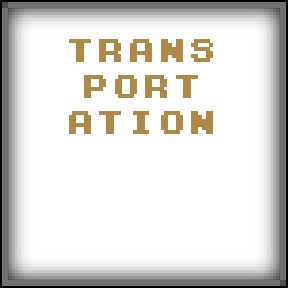
<style>
.page{position:relative;width:288px;height:288px;background:#ffffff}
.page>*{position:absolute;margin:0}
.t1{font:30px "KongtextRegular";letter-spacing:0.022em;color:#ae8a46}
</style>
<div class="page">
<p class="t1" style="left:69px;top:39px;width:144px;height:95px;text-align:center">TRANS<br>PORT<br>ATION</p>
</div>
